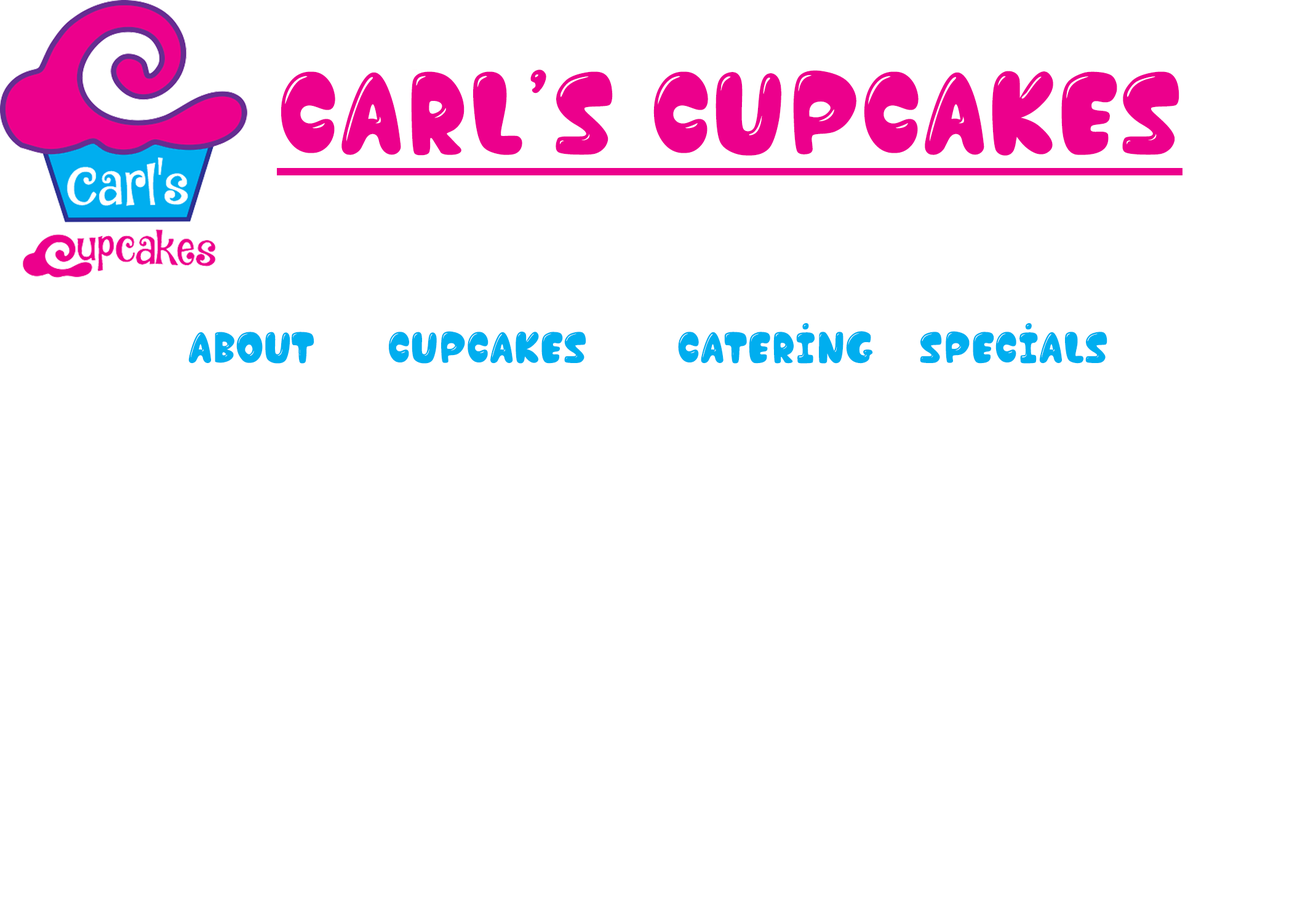
<style>
.page{position:relative;width:1292px;height:923px;background:#ffffff}
.page>*{position:absolute;margin:0}
.t1{font:123.1px "ChocolateBarDemo";color:#ec008c}
.t2{font:46.1px "ChocolateBarDemo";color:#00aeef}
</style>
<div class="page">
<p class="t1" style="left:281px;top:70px;width:898px;height:86px">CArl’s Cupcakes</p>
<p class="t2" style="left:188px;top:323px;width:919px;height:41px">About    Cupcakes       Catering   specials</p>
</div>
